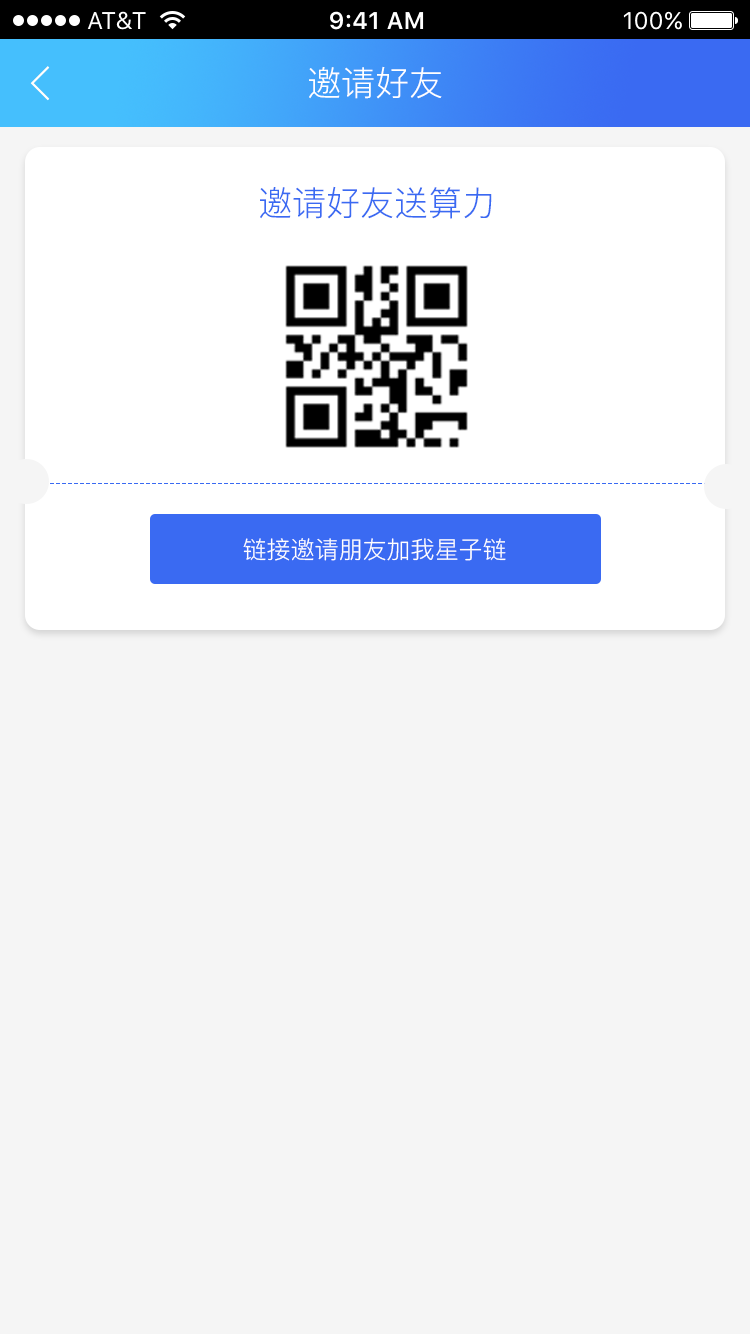
<style>
.page{position:relative;width:750px;height:1334px;background:#f5f5f5}
.page>*{position:absolute;margin:0}
.t1{font:34px "PingFang-SC-Regular";color:#ffffff}
.t2{font:34px "PingFang-SC-Regular";color:#3a6af2}
.t3{font:24px "PingFang-SC-Regular";color:#ffffff}
</style>
<div class="page">
<p class="t1" style="left:309px;top:66px;width:133px;height:33px">邀请好友</p>
<p class="t2" style="left:260px;top:186px;width:232px;height:33px">邀请好友送算力</p>
<p class="t3" style="left:243px;top:538px;width:263px;height:23px">链接邀请朋友加我星子链</p>
</div>
